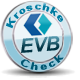
<style>
.page{position:relative;width:80px;height:80px;background:#ffffff}
.page>*{position:absolute;margin:0}
.t1{font:9px "Arial-BoldMT";letter-spacing:0.067em;color:#007ba1;scale:0.94 1}
.t2{font:19.8px "Arial-BoldItalicMT";letter-spacing:-0.013em}
.t3{font:9.2px "Arial-BoldMT";letter-spacing:0.127em;color:#005570}
</style>
<div class="page">
<p class="t1" style="left:6px;top:3px;width:57px;height:26px;rotate:-7deg">Kroschke</p>
<p class="t2" style="left:21px;top:36px;width:39px;height:17px;rotate:-4deg">EVB</p>
<p class="t3" style="left:21px;top:54px;width:43px;height:17px;rotate:-8deg">Check</p>
</div>
